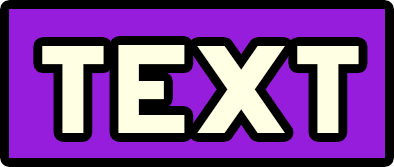
<style>
.page{position:relative;width:394px;height:167px;background:#971ddd}
.page>*{position:absolute;margin:0}
.t1{font:200px "ONRAMP";color:#ffffe3}
</style>
<div class="page">
<p class="t1" style="left:42px;top:45px;width:317px;height:88px">TEXT</p>
</div>
